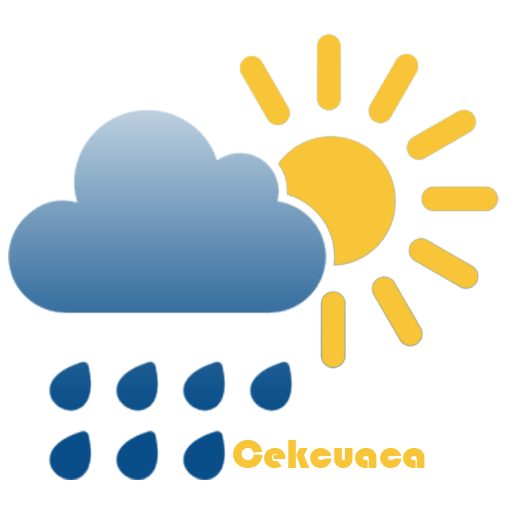
<style>
.page{position:relative;width:512px;height:512px;background:#ffffff}
.page>*{position:absolute;margin:0}
.t1{font:41.5px "Bauhaus93";color:#f8c438}
</style>
<div class="page">
<p class="t1" style="left:233px;top:440px;width:192px;height:29px">Cekcuaca</p>
</div>
